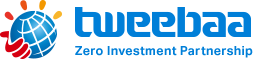
<style>
.page{position:relative;width:264px;height:61px;background:#ffffff}
.page>*{position:absolute;margin:0}
.t1{font:12.5px "AktivGrotesk-Bold";letter-spacing:0.025em;color:#007fd8}
</style>
<div class="page">
<p class="t1" style="left:75px;top:46px;width:178px;height:12px">Zero Investment Partnership</p>
</div>
